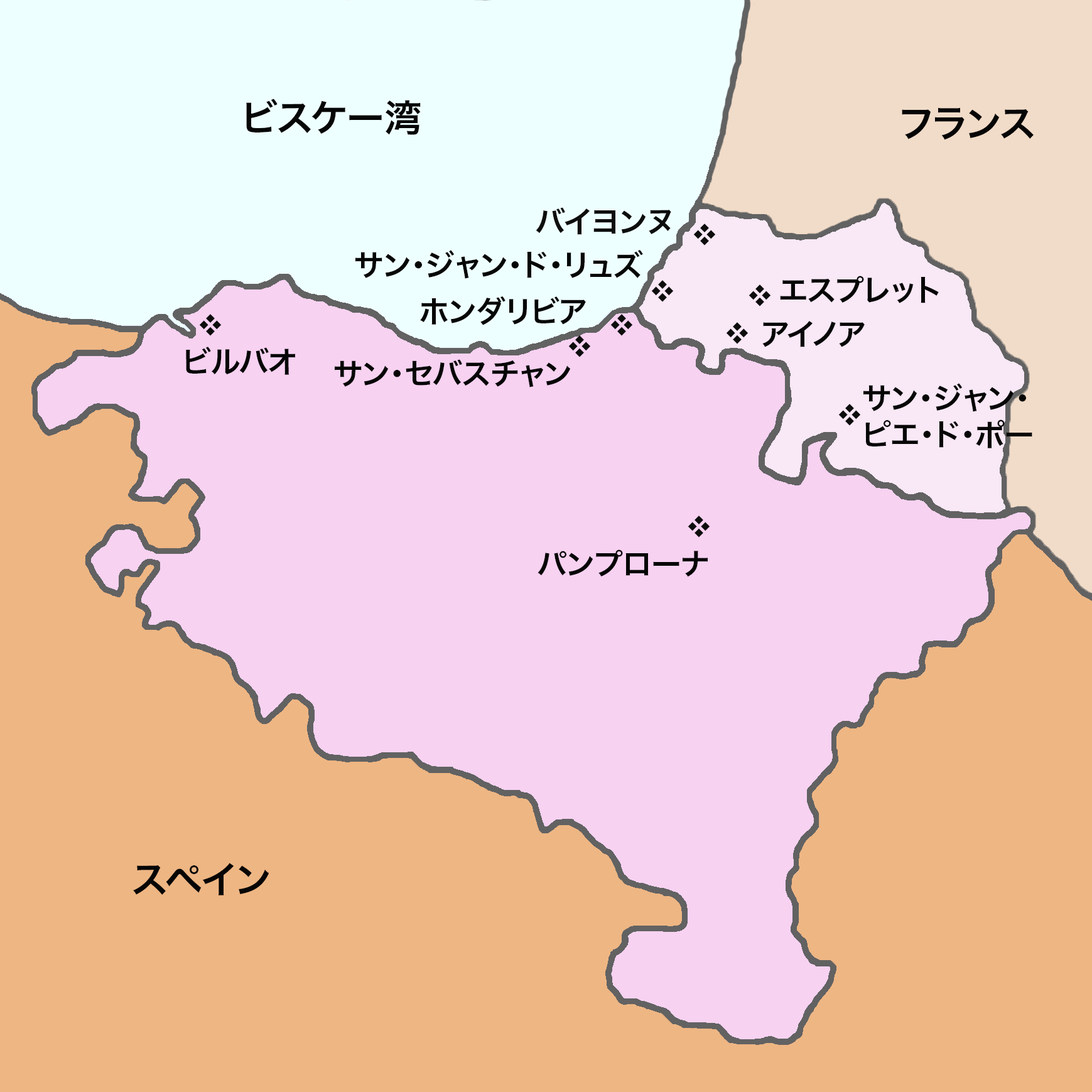
<style>
.page{position:relative;width:1092px;height:1092px;background:#eeb683}
.page>*{position:absolute;margin:0}
.t1{font:37.7px "HiraKakuProN-W6";color:#060606}
.t2{font:30.1px "HiraKakuProN-W6";color:#0d0d0d}
.t3{font:22.6px "HiraKakuProN-W3";color:#0d0d0d}
.t4{font:30.1px "HiraKakuProN-W6";color:#060606}
</style>
<div class="page">
<p class="t1" style="left:246px;top:99px;width:175px;height:36px">ビスケー湾</p>
<p class="t1" style="left:902px;top:107px;width:132px;height:33px">フランス</p>
<p class="t2" style="left:536px;top:207px;width:135px;height:28px">バイヨンヌ</p>
<p class="t3" style="left:693px;top:224px;width:23px;height:22px">◆</p>
<p class="t4" style="left:355px;top:250px;width:288px;height:29px">サン・ジャン・ド・リュズ</p>
<p class="t3" style="left:651px;top:280px;width:23px;height:22px">◆</p>
<p class="t4" style="left:780px;top:276px;width:159px;height:27px">エスプレット</p>
<p class="t3" style="left:749px;top:284px;width:22px;height:22px">◆</p>
<p class="t4" style="left:420px;top:296px;width:166px;height:29px">ホンダリビア</p>
<p class="t3" style="left:199px;top:314px;width:23px;height:22px">◆</p>
<p class="t3" style="left:610px;top:314px;width:23px;height:22px">◆</p>
<p class="t3" style="left:726px;top:322px;width:23px;height:22px">◆</p>
<p class="t4" style="left:762px;top:321px;width:103px;height:26px">アイノア</p>
<p class="t3" style="left:568px;top:335px;width:23px;height:22px">◆</p>
<p class="t4" style="left:186px;top:347px;width:109px;height:28px">ビルバオ</p>
<p class="t4" style="left:335px;top:359px;width:236px;height:28px">サン・セバスチャン</p>
<p class="t4" style="left:863px;top:383px;width:169px;height:65px">サン・ジャン・<br>ピエ・ド・ポー</p>
<p class="t3" style="left:838px;top:404px;width:23px;height:22px">◆</p>
<p class="t3" style="left:688px;top:516px;width:22px;height:22px">◆</p>
<p class="t4" style="left:538px;top:549px;width:170px;height:28px">パンプローナ</p>
<p class="t1" style="left:133px;top:863px;width:136px;height:32px">スペイン</p>
</div>
